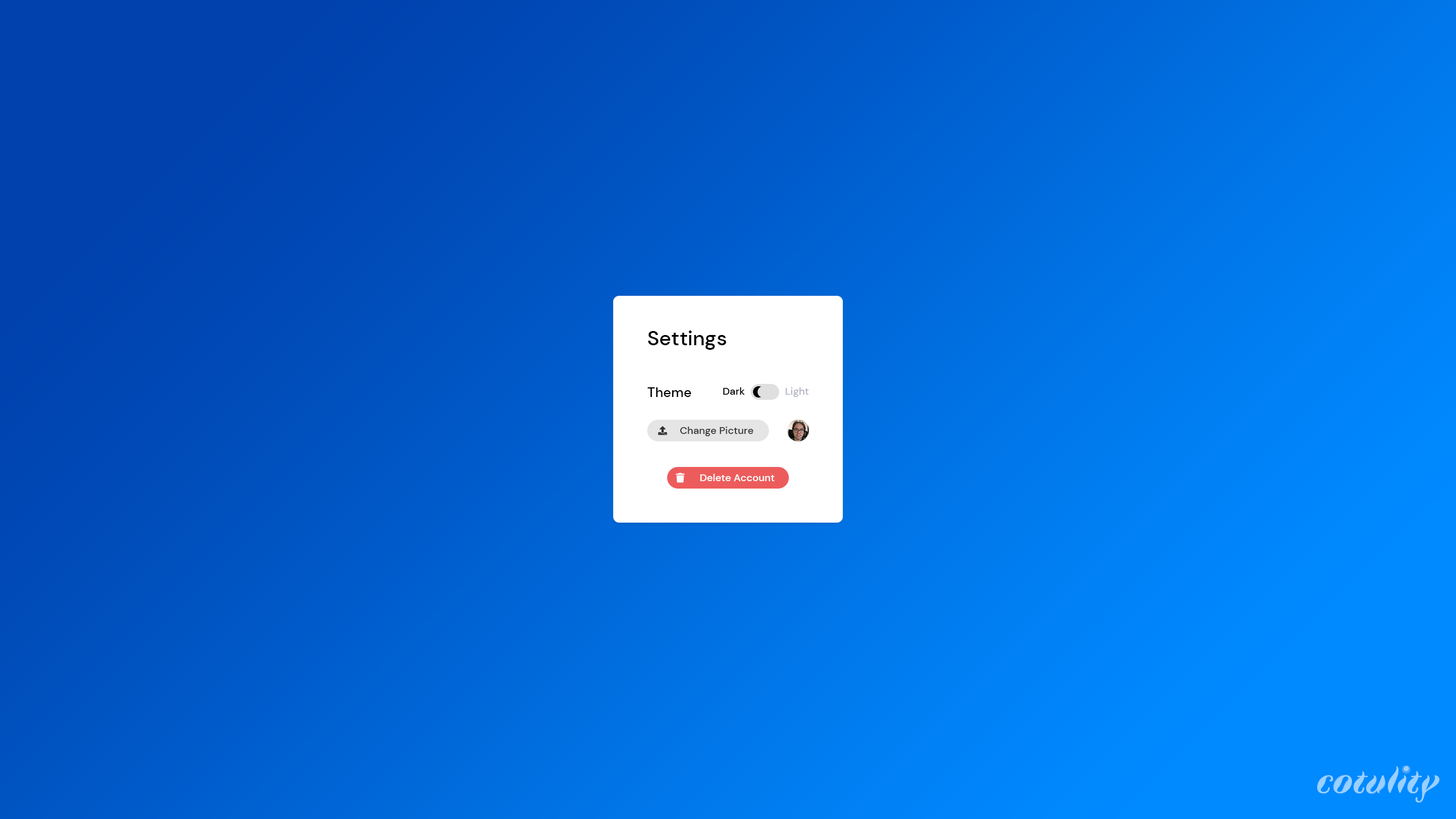
<style>
.page{position:relative;width:1456px;height:819px}
.page>*{position:absolute;margin:0}
.t1{font:20.5px "DMSans-Medium";color:#000000}
.t2{font:13.6px "DMSans-Medium";color:#000000}
.t3{font:10.2px "DMSans-Medium";color:#010101}
.t4{font:10.2px "DMSans-Medium";color:#b3b6c5}
.t5{font:10.2px "DMSans-Medium";color:#333333}
.t6{font:10.2px "DMSans-Medium";color:#ffffff}
.t7{font:36.9px "Faune-DisplayBoldItalic";color:#99d0ff}
.t8{font:16.6px "Faune-DisplayBlack"}
</style>
<div class="page">
<p class="t1" style="left:648px;top:330px;width:78px;height:20px">Settings</p>
<p class="t2" style="left:647px;top:387px;width:44px;height:10px">Theme</p>
<p class="t3" style="left:723px;top:387px;width:22px;height:8px">Dark</p>
<p class="t3" style="left:723px;top:387px;width:22px;height:8px">Dark</p>
<p class="t4" style="left:785px;top:387px;width:24px;height:10px">Light</p>
<p class="t4" style="left:785px;top:387px;width:24px;height:10px">Light</p>
<p class="t5" style="left:680px;top:427px;width:74px;height:9px">Change Picture</p>
<p class="t6" style="left:700px;top:474px;width:75px;height:7px">Delete Account</p>
<p class="t7" style="left:1317px;top:766px;width:122px;height:36px">cotulity</p>
<p class="t8" style="left:1402px;top:765px;width:8px;height:8px;rotate:90deg">o</p>
<p class="t7" style="left:1407px;top:771px;width:14px;height:22px">t</p>
<p class="t7" style="left:1333px;top:775px;width:18px;height:18px">o</p>
<p class="t7" style="left:1367px;top:776px;width:19px;height:18px">u</p>
</div>
